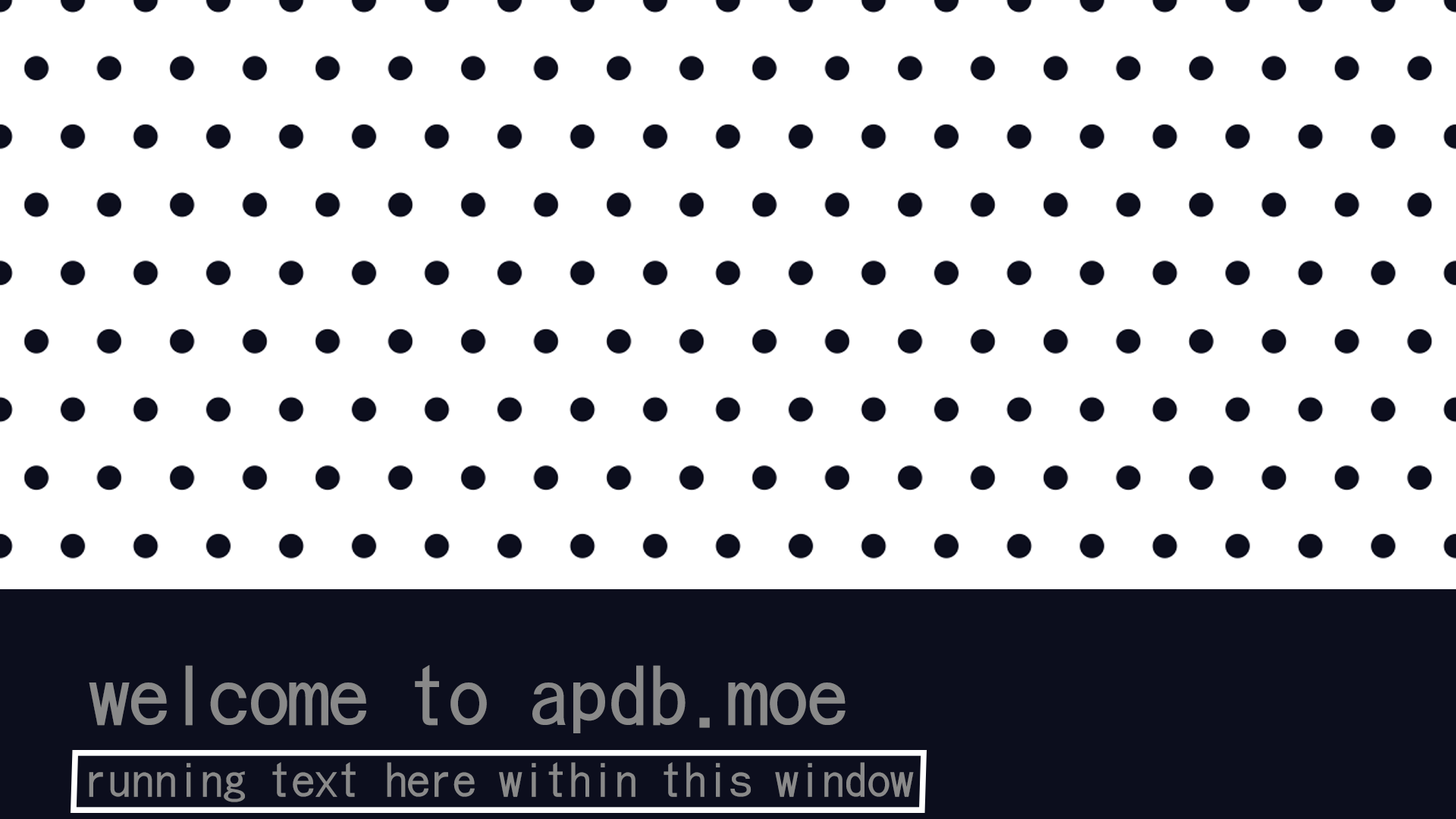
<style>
.page{position:relative;width:1456px;height:819px;background:#ffffff}
.page>*{position:absolute;margin:0}
.t1{font:79.8px "Sazanami-Gothic-Regular";color:#898989}
.t2{font:46px "Sazanami-Gothic-Regular";color:#898989}
</style>
<div class="page">
<p class="t1" style="left:89px;top:665px;width:757px;height:68px">welcome to apdb.moe</p>
<p class="t2" style="left:89px;top:762px;width:825px;height:40px">running text here within this window</p>
</div>
